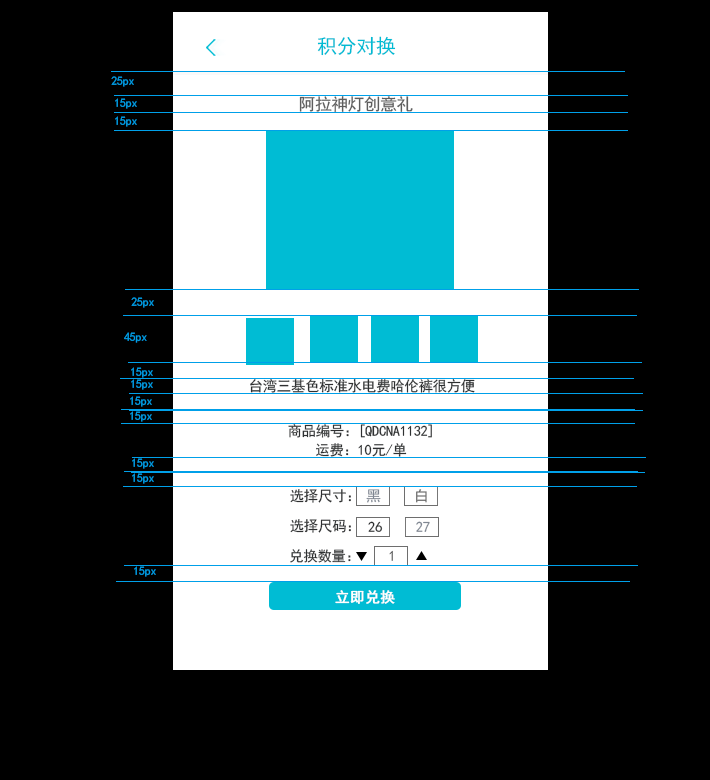
<style>
.page{position:relative;width:710px;height:780px;background:#000000}
.page>*{position:absolute;margin:0}
.t1{font:20px "SimHei";letter-spacing:-0.02em;color:#00bcd4}
.t2{font:12px "SimHei";letter-spacing:-0.02em;color:#00a0e9}
.t3{font:16.7px "SimHei";letter-spacing:-0.02em;color:#5d5d5d}
.t4{font:14.5px "SimHei";letter-spacing:-0.02em;color:#2e3031}
.t5{font:14.5px/18.9px "SimHei";letter-spacing:-0.02em;color:#2e3031}
.t6{font:14.5px "SimHei";letter-spacing:-0.02em;color:#808792}
.t7{font:14.5px "SimHei";letter-spacing:-0.02em}
.t8{font:14.5px "SimHei";letter-spacing:-0.02em;color:#5d5d5d}
.t9{font:14.5px "SimHei";letter-spacing:0.02em;color:#ffffff;font-weight:bold}
</style>
<div class="page">
<p class="t1" style="left:317px;top:36px;width:79px;height:20px">积分对换</p>
<p class="t2" style="left:111px;top:76px;width:23px;height:11px">25px</p>
<p class="t2" style="left:115px;top:98px;width:22px;height:11px">15px</p>
<p class="t3" style="left:299px;top:96px;width:114px;height:16px">阿拉神灯创意礼</p>
<p class="t2" style="left:115px;top:116px;width:22px;height:11px">15px</p>
<p class="t2" style="left:131px;top:297px;width:23px;height:11px">25px</p>
<p class="t2" style="left:124px;top:332px;width:23px;height:11px">45px</p>
<p class="t2" style="left:131px;top:367px;width:22px;height:11px">15px</p>
<p class="t2" style="left:131px;top:379px;width:22px;height:11px">15px</p>
<p class="t4" style="left:250px;top:379px;width:225px;height:14px">台湾三基色标准水电费哈伦裤很方便</p>
<p class="t2" style="left:130px;top:396px;width:22px;height:11px">15px</p>
<p class="t2" style="left:130px;top:411px;width:22px;height:11px">15px</p>
<p class="t5" style="left:288px;top:424px;width:144px;height:33px;text-align:center">商品编号：[QDCNA1132]<br>运费：10元/单</p>
<p class="t2" style="left:132px;top:458px;width:22px;height:11px">15px</p>
<p class="t2" style="left:132px;top:473px;width:22px;height:11px">15px</p>
<p class="t4" style="left:290px;top:489px;width:61px;height:14px">选择尺寸：</p>
<p class="t6" style="left:366px;top:489px;width:15px;height:14px">黑</p>
<p class="t7" style="left:416px;top:489px;width:11px;height:14px">白</p>
<p class="t4" style="left:290px;top:519px;width:61px;height:14px">选择尺码：</p>
<p class="t4" style="left:368px;top:521px;width:15px;height:11px">26</p>
<p class="t6" style="left:416px;top:521px;width:14px;height:11px">27</p>
<p class="t4" style="left:290px;top:549px;width:61px;height:14px">兑换数量：</p>
<p class="t8" style="left:389px;top:550px;width:4px;height:11px">1</p>
<p class="t2" style="left:134px;top:566px;width:22px;height:11px">15px</p>
<p class="t9" style="left:335px;top:590px;width:60px;height:14px">立即兑换</p>
</div>
